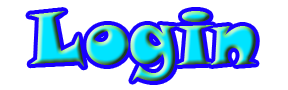
<style>
.page{position:relative;width:288px;height:90px;background:#ffffff}
.page>*{position:absolute;margin:0}
.t1{font:74.3px "SnapITC-Regular"}
</style>
<div class="page">
<p class="t1" style="left:29px;top:11px;width:227px;height:70px">Login</p>
</div>
